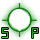
<style>
.page{position:relative;width:40px;height:40px;background:#ffffff}
.page>*{position:absolute;margin:0}
.t1{font:16px "Digital-7";color:#0aab06}
</style>
<div class="page">
<p class="t1" style="left:2px;top:28px;width:36px;height:10px">S     P</p>
</div>
